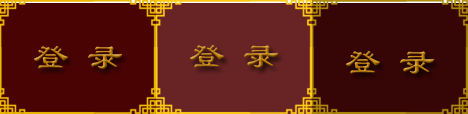
<style>
.page{position:relative;width:468px;height:114px;background:#360505}
.page>*{position:absolute;margin:0}
.t1{font:36px "LiSu"}
</style>
<div class="page">
<p class="t1" style="left:34px;top:46px;width:89px;height:23px">登 录</p>
<p class="t1" style="left:190px;top:45px;width:89px;height:23px">登 录</p>
<p class="t1" style="left:346px;top:51px;width:89px;height:23px">登 录</p>
</div>
